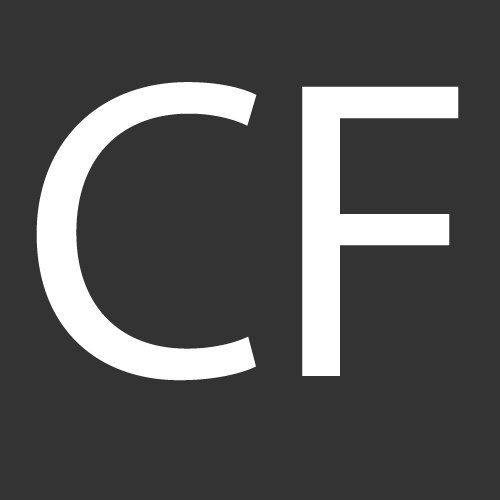
<style>
.page{position:relative;width:500px;height:500px;background:#333333}
.page>*{position:absolute;margin:0}
.t1{font:428.6px "MyriadPro-Regular";color:#ffffff}
</style>
<div class="page">
<p class="t1" style="left:36px;top:82px;width:423px;height:299px">CF</p>
</div>
